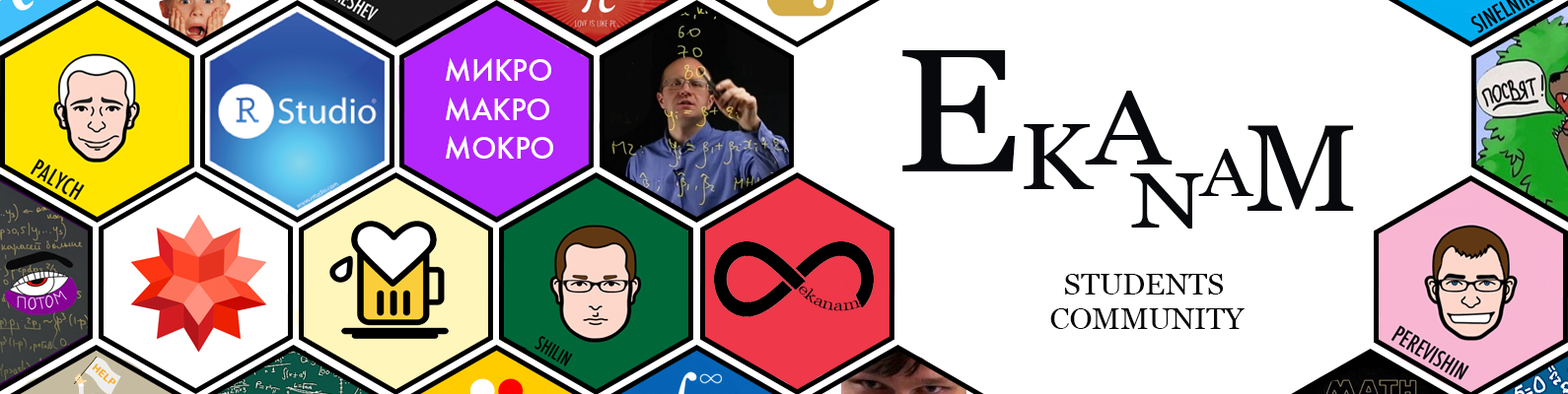
<style>
.page{position:relative;width:1568px;height:394px;background:#ffffff}
.page>*{position:absolute;margin:0}
.t1{font:175.8px "Georgia";letter-spacing:-0.005em;color:#07090c;scale:1.09 1}
.t2{font:32.2px "FuturaPT-Medium";letter-spacing:-0.005em;color:#ffffff}
.t3{font:106.7px "Georgia";letter-spacing:-0.005em;color:#07090c;scale:1.14 1}
.t4{font:94.1px "Georgia";letter-spacing:-0.005em;color:#07090c;scale:1.11 1}
.t5{font:122.9px "Georgia";letter-spacing:-0.005em;color:#07090c}
.t6{font:68.4px "Georgia";letter-spacing:-0.005em;color:#07090c;scale:1.13 1}
.t7{font:77.8px "Georgia";letter-spacing:-0.005em;color:#07090c;scale:1.25 1}
.t8{font:29px "Georgia";letter-spacing:-0.005em;color:#07090c;scale:1.05 1}
.t9{font:26.7px "Georgia";letter-spacing:-0.005em;color:#07090c;scale:1.05 1}
.t10{font:15.4px "Georgia";letter-spacing:-0.005em;color:#080808;scale:0.96 1}
</style>
<div class="page">
<p class="t1" style="left:902px;top:50px;width:114px;height:122px">E</p>
<p class="t2" style="left:446px;top:57px;width:107px;height:103px">МИКРО<br>МАКРО<br>МОКРО</p>
<p class="t3" style="left:1085px;top:91px;width:88px;height:74px">A</p>
<p class="t4" style="left:1024px;top:124px;width:71px;height:65px">K</p>
<p class="t5" style="left:1247px;top:125px;width:107px;height:86px">M</p>
<p class="t6" style="left:1198px;top:149px;width:56px;height:47px">A</p>
<p class="t7" style="left:1130px;top:174px;width:74px;height:55px">N</p>
<p class="t8" style="left:1050px;top:274px;width:195px;height:55px"><span class="t9"> </span> STUDENTS<br>COMMUNITY</p>
<p class="t10" style="left:799px;top:286px;width:62px;height:26px;rotate:15deg">ekanam</p>
</div>
